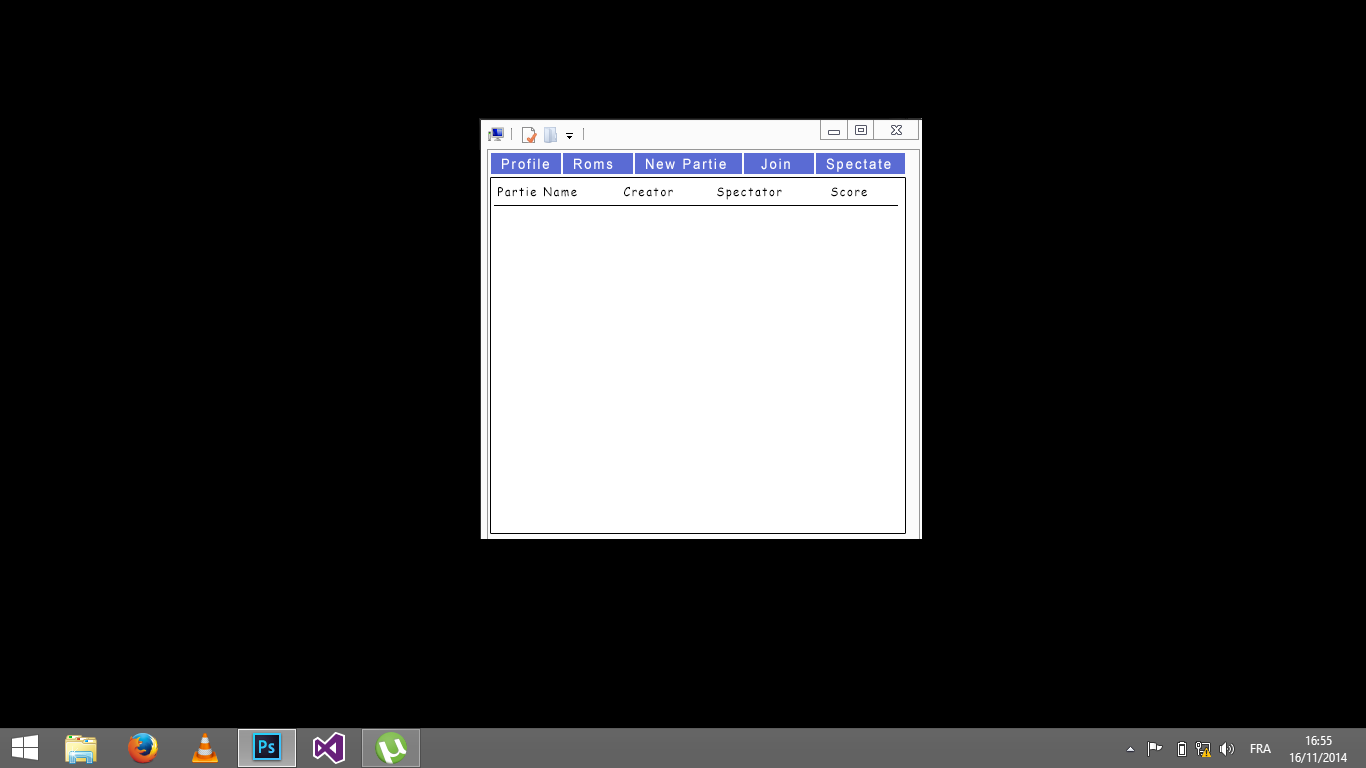
<style>
.page{position:relative;width:1366px;height:768px;background:#000000}
.page>*{position:absolute;margin:0}
.t1{font:14.3px "ArialMT";letter-spacing:0.15em;color:#ffffff;scale:0.91 1}
.t2{font:12.1px "ComicSansMS";letter-spacing:0.15em;color:#000000;scale:0.91 1}
</style>
<div class="page">
<p class="t1" style="left:502px;top:158px;width:47px;height:11px">Profile</p>
<p class="t1" style="left:574px;top:158px;width:39px;height:11px">Roms</p>
<p class="t1" style="left:646px;top:158px;width:80px;height:11px">New Partie</p>
<p class="t1" style="left:761px;top:158px;width:29px;height:12px">Join</p>
<p class="t1" style="left:826px;top:158px;width:65px;height:14px">Spectate</p>
<p class="t2" style="left:498px;top:187px;width:79px;height:10px">Partie Name</p>
<p class="t2" style="left:624px;top:186px;width:49px;height:11px">Creator</p>
<p class="t2" style="left:717px;top:187px;width:65px;height:13px">Spectator</p>
<p class="t2" style="left:831px;top:187px;width:36px;height:10px">Score</p>
</div>
